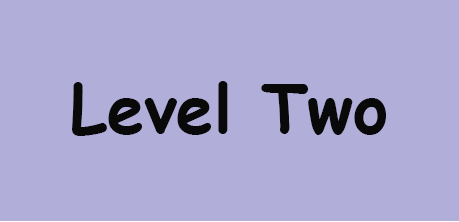
<style>
.page{position:relative;width:459px;height:222px;background:#b1afd9}
.page>*{position:absolute;margin:0}
.t1{font:66.7px "ComicSansMS-Bold";color:#090909}
</style>
<div class="page">
<p class="t1" style="left:72px;top:81px;width:314px;height:55px">Level Two</p>
</div>
